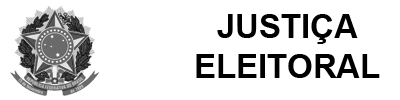
<style>
.page{position:relative;width:400px;height:100px;background:#ffffff}
.page>*{position:absolute;margin:0}
.t1{font:32.9px "Arial-BoldMT";color:#000000}
</style>
<div class="page">
<p class="t1" style="left:196px;top:14px;width:184px;height:64px;text-align:center">JUSTIÇA<br>ELEITORAL</p>
</div>
